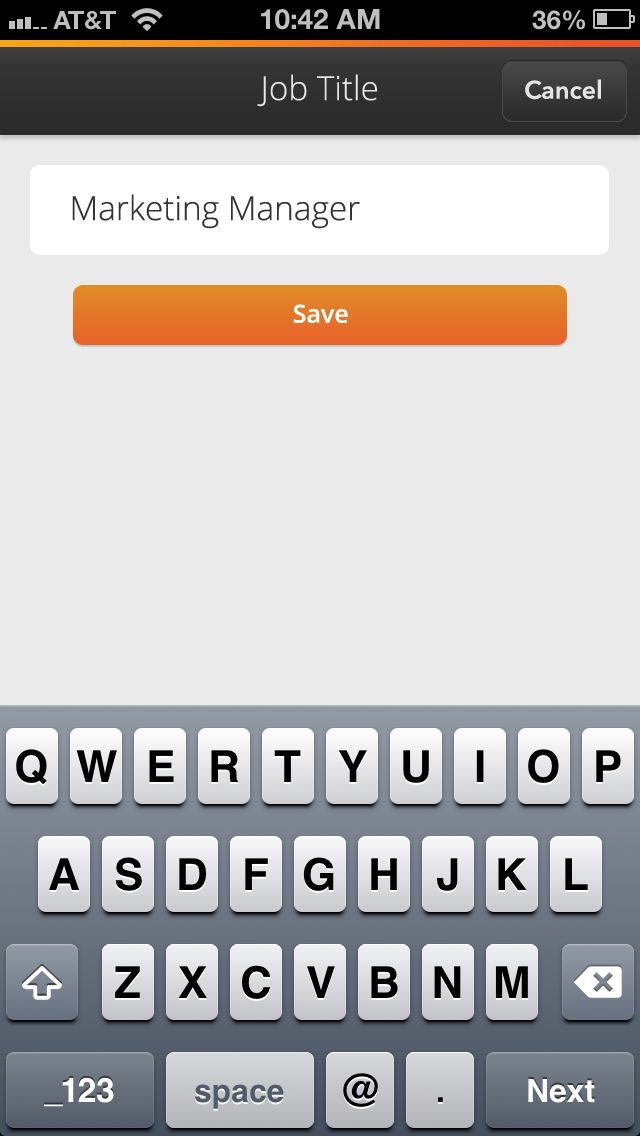
<style>
.page{position:relative;width:640px;height:1136px;background:#eaeaea}
.page>*{position:absolute;margin:0}
.t1{font:33.3px "OpenSans-Light";color:#e5e5e5}
.t2{font:25px "AvenirNext-DemiBold";color:#e5e5e5}
.t3{font:33.3px "OpenSans-Light";color:#343434}
.t4{font:25px "OpenSans-Semibold";color:#ffffff}
</style>
<div class="page">
<p class="t1" style="left:257px;top:74px;width:120px;height:33px">Job Title</p>
<p class="t2" style="left:525px;top:79px;width:76px;height:21px">Cancel</p>
<p class="t3" style="left:72px;top:194px;width:288px;height:35px">Marketing Manager</p>
<p class="t4" style="left:293px;top:304px;width:55px;height:19px">Save</p>
</div>
